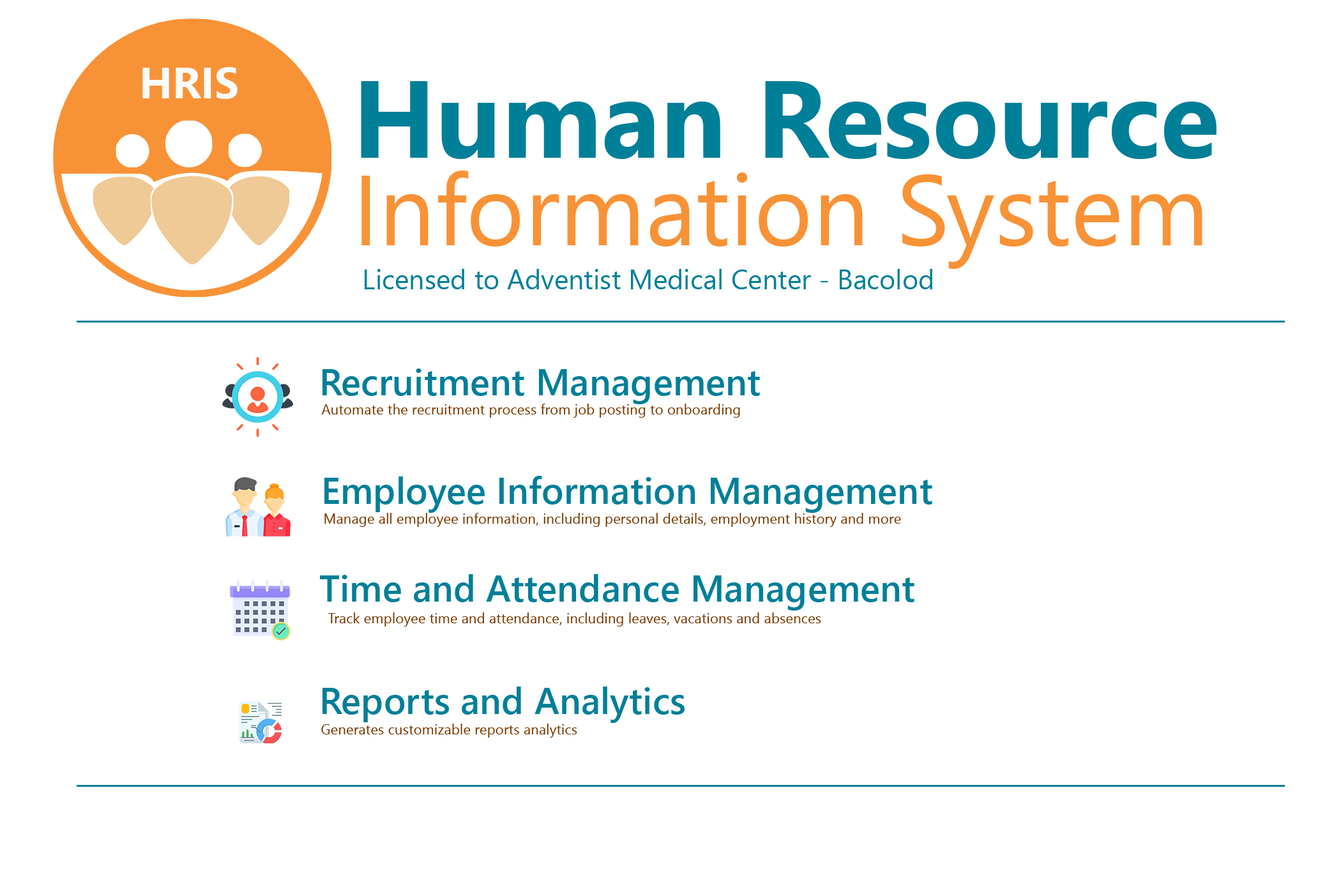
<style>
.page{position:relative;width:1341px;height:889px;background:#ffffff}
.page>*{position:absolute;margin:0}
.t1{font:26.2px/136.4px "SegoeUI-Bold";color:#007f98}
.t2{font:23.9px/124.7px "SegoeUI";color:#f89236}
.t3{font:6.6px/34.3px "SegoeUI";color:#007f98}
.t4{font:37.3px "SegoeUI-Semibold";color:#007f98}
.t5{font:14.3px "SegoeUI";color:#773800}
</style>
<div class="page">
<p class="t1" style="left:361px;top:81px;width:856px;height:78px;text-align:justify">Human Resource</p>
<p class="t2" style="left:361px;top:171px;width:842px;height:98px;text-align:justify">Information System</p>
<p class="t3" style="left:365px;top:269px;width:567px;height:20px;text-align:justify">Licensed to Adventist Medical Center - Bacolod</p>
<p class="t4" style="left:323px;top:369px;width:437px;height:35px">Recruitment Management</p>
<p class="t5" style="left:321px;top:404px;width:419px;height:14px">Automate the recruitment process from job posting to onboarding</p>
<p class="t4" style="left:324px;top:476px;width:608px;height:37px">Employee Information Management</p>
<p class="t5" style="left:324px;top:513px;width:577px;height:14px">Manage all employee information, including personal details, employment history and more</p>
<p class="t4" style="left:320px;top:574px;width:595px;height:37px">Time and Attendance Management</p>
<p class="t5" style="left:328px;top:613px;width:493px;height:14px">Track employee time and attendance, including leaves, vacations and absences</p>
<p class="t4" style="left:323px;top:687px;width:362px;height:36px">Reports and Analytics</p>
<p class="t5" style="left:321px;top:724px;width:256px;height:14px">Generates customizable reports analytics</p>
</div>
